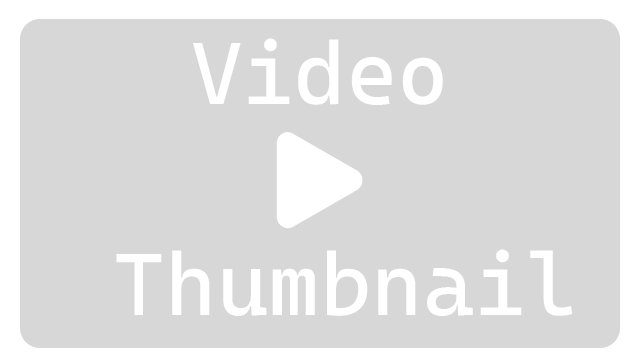
<style>
.page{position:relative;width:640px;height:360px;background:#d7d7d7}
.page>*{position:absolute;margin:0}
.t1{font:88px "CascadiaCode-Roman";color:#ffffff}
</style>
<div class="page">
<p class="t1" style="left:116px;top:38px;width:457px;height:278px;text-align:center">Video<br> <br> Thumbnail</p>
</div>
